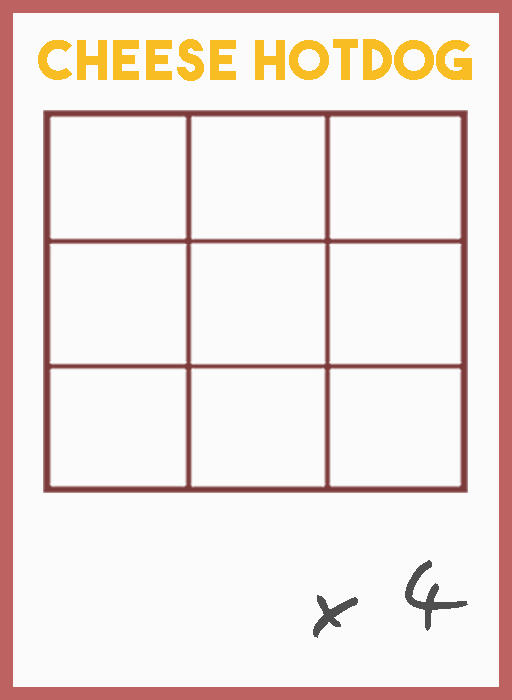
<style>
.page{position:relative;width:512px;height:700px;background:#fbfbfb}
.page>*{position:absolute;margin:0}
.t1{font:54.5px "TheBoldFont";letter-spacing:0.05em;color:#f7bd22}
.t2{font:106.1px "EasySpeech";letter-spacing:0.05em;color:#4f4f4f}
</style>
<div class="page">
<p class="t1" style="left:38px;top:39px;width:434px;height:42px">cheese Hotdog</p>
<p class="t2" style="left:313px;top:560px;width:155px;height:78px">x 4</p>
</div>
